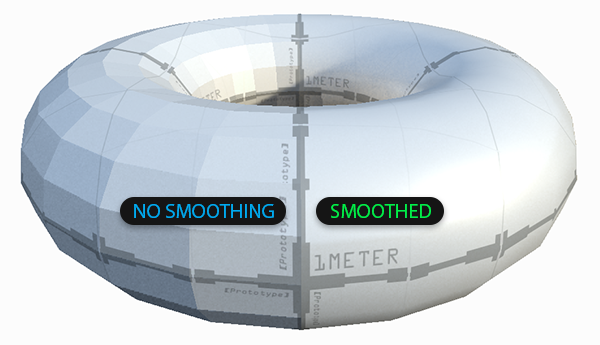
<style>
.page{position:relative;width:600px;height:345px;background:#fcfcfc}
.page>*{position:absolute;margin:0}
.t1{font:15.4px "MyriadPro-Regular";color:#00aaef;text-transform:uppercase}
.t2{font:15.4px "MyriadPro-Regular";color:#00ef49;text-transform:uppercase}
</style>
<div class="page">
<p class="t1" style="left:134px;top:204px;width:140px;height:14px">No Smoothing</p>
<p class="t2" style="left:331px;top:204px;width:100px;height:14px">smoothed</p>
</div>
